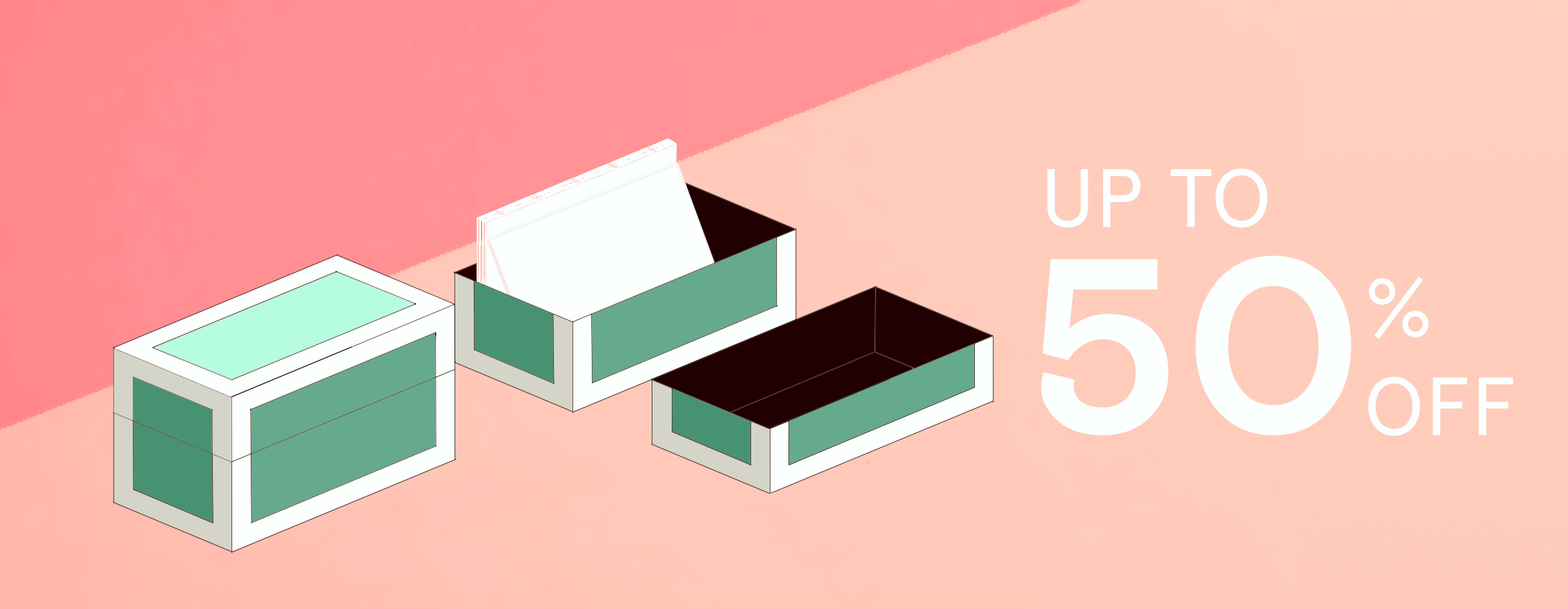
<style>
.page{position:relative;width:1568px;height:609px}
.page>*{position:absolute;margin:0}
.t1{font:82px "ApercuArabicPro-Regular";letter-spacing:0.025em;color:#fbfffe}
.t2{font:246.1px "BasisGrotesquePro-Bold";letter-spacing:0.025em;color:#fbfffe}
</style>
<div class="page">
<p class="t1" style="left:1047px;top:168px;width:221px;height:60px">UP TO</p>
<p class="t2" style="left:1041px;top:255px;width:310px;height:180px">50</p>
<p class="t1" style="left:1368px;top:276px;width:145px;height:160px">%<br>OFF</p>
</div>
